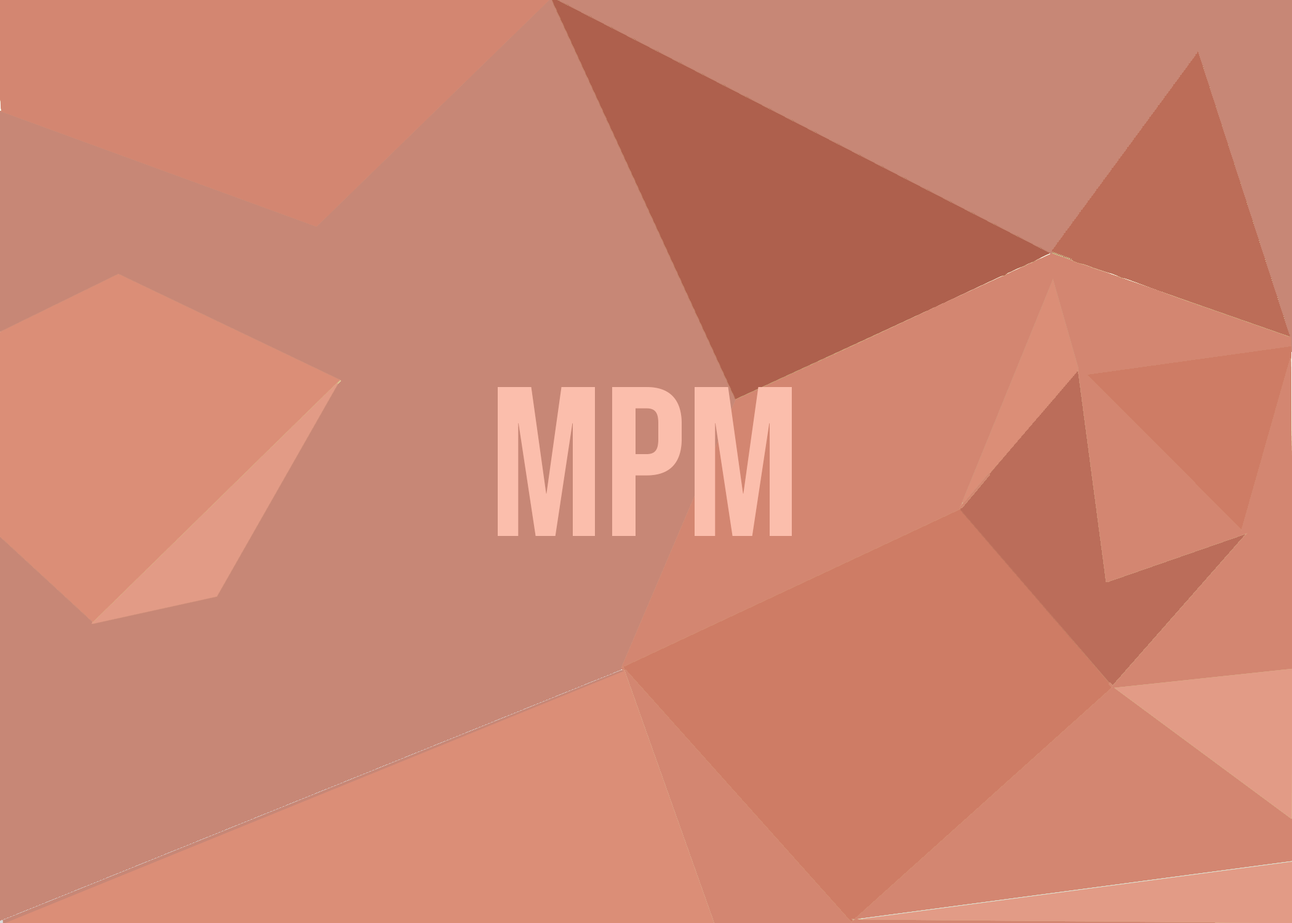
<style>
.page{position:relative;width:1292px;height:923px;background:#c78776}
.page>*{position:absolute;margin:0}
.t1{font:212.8px "BebasNeue-Regular";color:#f7b1a1}
</style>
<div class="page">
<p class="t1" style="left:498px;top:387px;width:294px;height:149px">Mpm</p>
</div>
